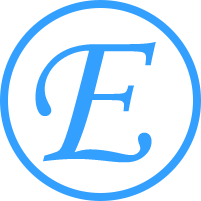
<style>
.page{position:relative;width:201px;height:201px;background:#ffffff}
.page>*{position:absolute;margin:0}
.t1{font:200px "MonotypeCorsiva";letter-spacing:-0.025em;color:#33a0ff}
</style>
<div class="page">
<p class="t1" style="left:35px;top:42px;width:121px;height:121px">E</p>
</div>
